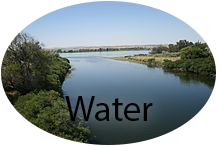
<style>
.page{position:relative;width:220px;height:147px;background:#ffffff}
.page>*{position:absolute;margin:0}
.t1{font:36px "MyriadPro-Regular";color:#000000}
</style>
<div class="page">
<p class="t1" style="left:65px;top:96px;width:88px;height:25px">Water</p>
</div>
